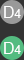
<style>
.page{position:relative;width:24px;height:60px;background:#333333}
.page>*{position:absolute;margin:0}
.t1{font:16px "ArialMT";color:#ffffff}
.t2{font:12px "ArialMT";color:#ffffff}
</style>
<div class="page">
<p class="t1" style="left:4px;top:6px;width:17px;height:12px">D<span class="t2">4</span></p>
<p class="t1" style="left:4px;top:42px;width:17px;height:12px">D<span class="t2">4</span></p>
</div>
